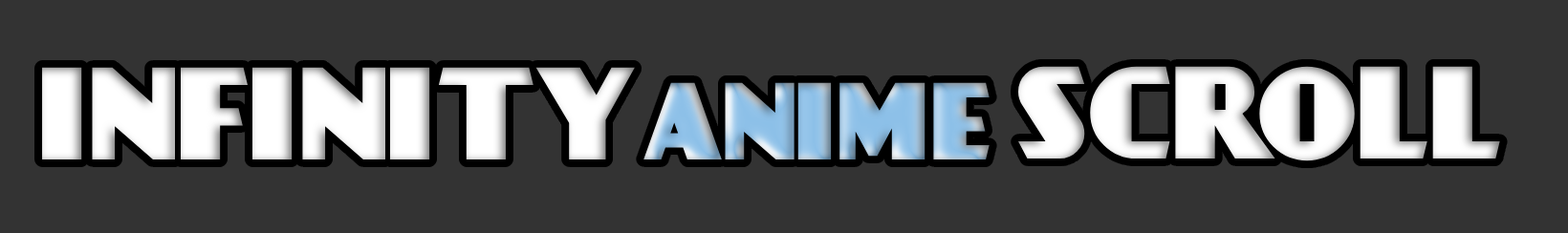
<style>
.page{position:relative;width:1568px;height:233px;background:#333333}
.page>*{position:absolute;margin:0}
.t1{font:114.7px "DayPosterBlack";color:#ffffff}
.t2{font:95.6px "DayPosterBlack"}
</style>
<div class="page">
<p class="t1" style="left:1018px;top:66px;width:482px;height:96px">SCROLL</p>
<p class="t1" style="left:42px;top:67px;width:593px;height:94px">INFINITY</p>
<p class="t2" style="left:643px;top:82px;width:347px;height:79px">ANIME</p>
</div>
